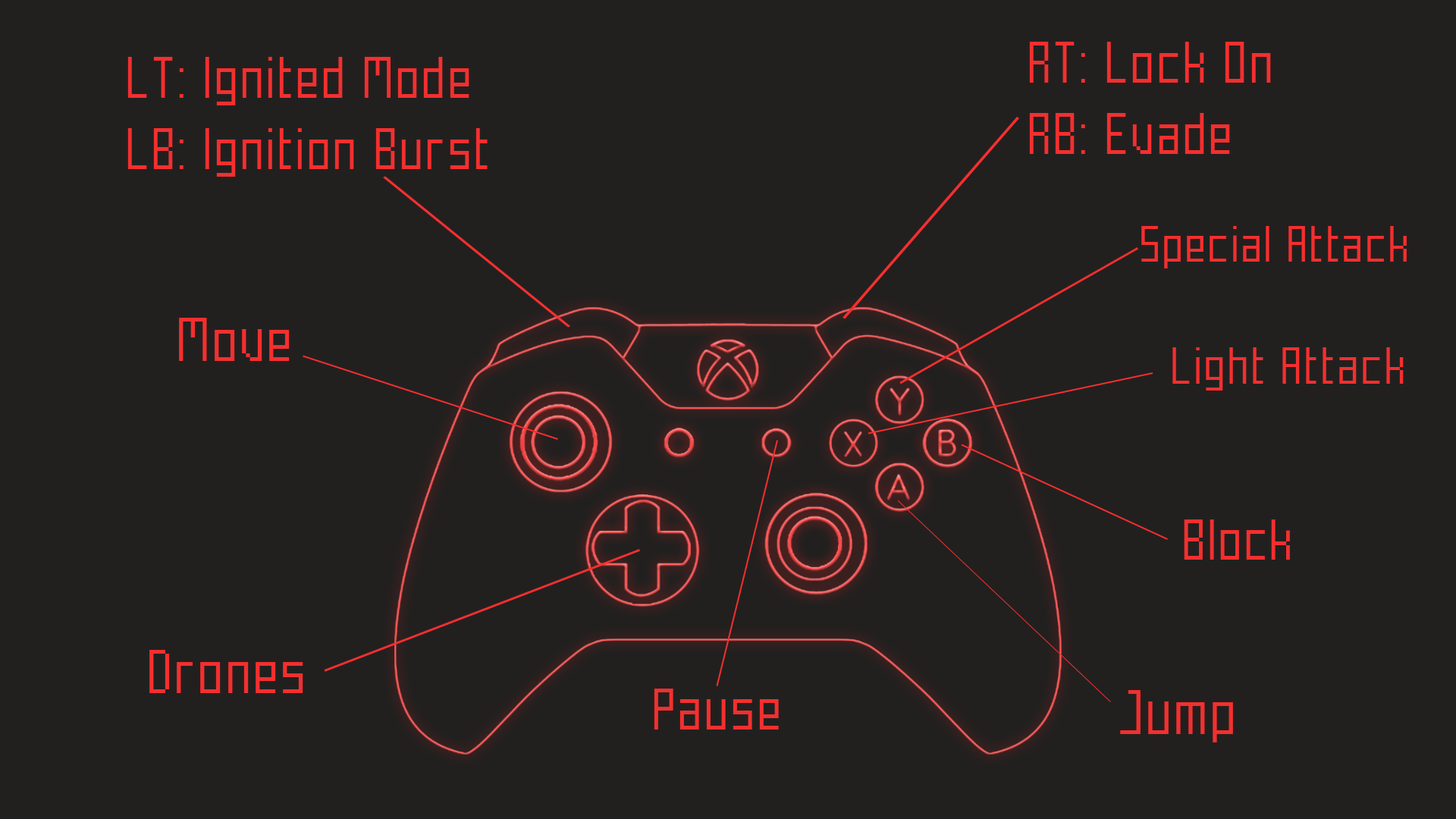
<style>
.page{position:relative;width:1456px;height:819px;background:#22201f}
.page>*{position:absolute;margin:0}
.t1{font:59.3px "Mecha";color:#f42f2f}
.t2{font:52.3px "Mecha";color:#f42f2f}
.t3{font:62.7px "Mecha";color:#f42f2f}
.t4{font:53.4px "Mecha";color:#f42f2f}
.t5{font:58.3px "Mecha";color:#f42f2f}
.t6{font:60.2px "Mecha";color:#f42f2f}
.t7{font:64.3px "Mecha";color:#f42f2f}
</style>
<div class="page">
<p class="t1" style="left:1029px;top:42px;width:242px;height:112px">RT: Lock On<br>RB: Evade</p>
<p class="t1" style="left:127px;top:57px;width:361px;height:120px">LT: Ignited Mode<br>LB: Ignition Burst</p>
<p class="t2" style="left:1141px;top:226px;width:266px;height:42px">Special Attack</p>
<p class="t3" style="left:179px;top:318px;width:111px;height:43px">Move</p>
<p class="t4" style="left:1172px;top:347px;width:232px;height:44px">Light Attack</p>
<p class="t5" style="left:1184px;top:519px;width:106px;height:41px">Block</p>
<p class="t3" style="left:149px;top:650px;width:154px;height:43px">Drones</p>
<p class="t6" style="left:654px;top:689px;width:125px;height:41px">Pause</p>
<p class="t7" style="left:1120px;top:690px;width:113px;height:52px">Jump</p>
</div>
